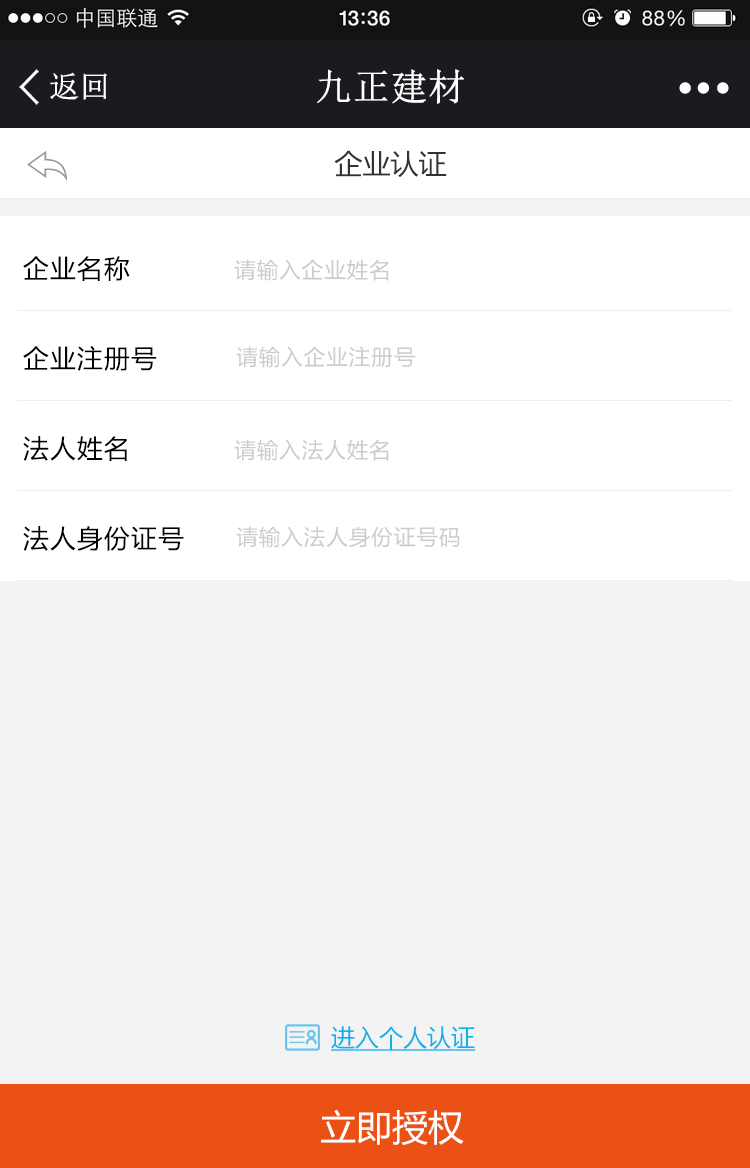
<style>
.page{position:relative;width:750px;height:1168px;background:#f3f3f3}
.page>*{position:absolute;margin:0}
.t1{font:30px "NSimSun";color:#ffffff;font-weight:bold}
.t2{font:36.7px "NSimSun";color:#ffffff;font-weight:bold}
.t3{font:28px "MicrosoftYaHei";color:#333333}
.t4{font:28px "MicrosoftYaHei";color:#333333;font-weight:bold}
.t5{font:25.7px "MicrosoftYaHei";letter-spacing:0.05em;color:#000000}
.t6{font:21.4px "MicrosoftYaHei";letter-spacing:0.05em;color:#cccccc}
.t7{font:24px "MicrosoftYaHei";color:#0bb3eb;text-decoration:underline}
.t8{font:36px "MicrosoftYaHei";color:#ffffff}
</style>
<div class="page">
<p class="t1" style="left:50px;top:72px;width:57px;height:28px">返回</p>
<p class="t2" style="left:317px;top:69px;width:147px;height:35px">九正建材</p>
<p class="t3" style="left:334px;top:150px;width:113px;height:28px"><span class="t4"><br></span>企业认证</p>
<p class="t5" style="left:23px;top:256px;width:107px;height:25px">企业名称</p>
<p class="t6" style="left:234px;top:259px;width:155px;height:22px">请输入企业姓名</p>
<p class="t5" style="left:23px;top:346px;width:134px;height:25px">企业注册号</p>
<p class="t6" style="left:236px;top:346px;width:180px;height:22px">请输入企业注册号</p>
<p class="t5" style="left:23px;top:436px;width:104px;height:25px">法人姓名</p>
<p class="t6" style="left:234px;top:439px;width:155px;height:22px">请输入法人姓名</p>
<p class="t5" style="left:23px;top:526px;width:161px;height:25px">法人身份证号</p>
<p class="t6" style="left:236px;top:526px;width:224px;height:22px">请输入法人身份证号码</p>
<p class="t7" style="left:331px;top:1026px;width:145px;height:25px">进入个人认证</p>
<p class="t8" style="left:321px;top:1109px;width:143px;height:36px">立即授权</p>
</div>
